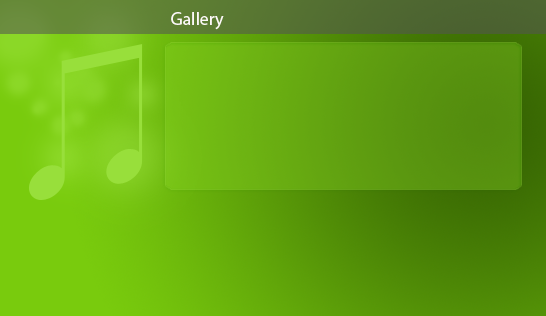
<style>
.page{position:relative;width:546px;height:316px}
.page>*{position:absolute;margin:0}
.t1{font:18px "MyriadPro-Regular";color:#fcf8f8}
</style>
<div class="page">
<p class="t1" style="left:171px;top:12px;width:53px;height:18px">Gallery</p>
</div>
